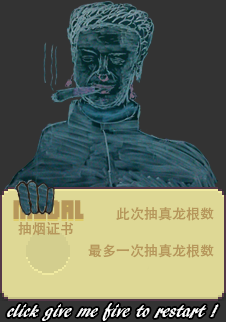
<style>
.page{position:relative;width:226px;height:322px;background:#333333}
.page>*{position:absolute;margin:0}
.t1{font:14px "AdobeHeitiStd-Regular";color:#b6975b}
.t2{font:18px "ARBLANCA";color:#ffffff}
</style>
<div class="page">
<p class="t1" style="left:116px;top:207px;width:98px;height:14px">此次抽真龙根数</p>
<p class="t1" style="left:18px;top:222px;width:55px;height:14px">抽烟证书</p>
<p class="t1" style="left:88px;top:244px;width:126px;height:14px">最多一次抽真龙根数</p>
<p class="t2" style="left:7px;top:303px;width:212px;height:18px">click give me five to restart !</p>
</div>
